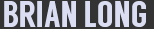
<style>
.page{position:relative;width:154px;height:29px;background:#333333}
.page>*{position:absolute;margin:0}
.t1{font:36px "Langdon";color:#dbdef3;text-transform:uppercase}
</style>
<div class="page">
<p class="t1" style="left:4px;top:1px;width:142px;height:26px">Brian Long</p>
</div>
